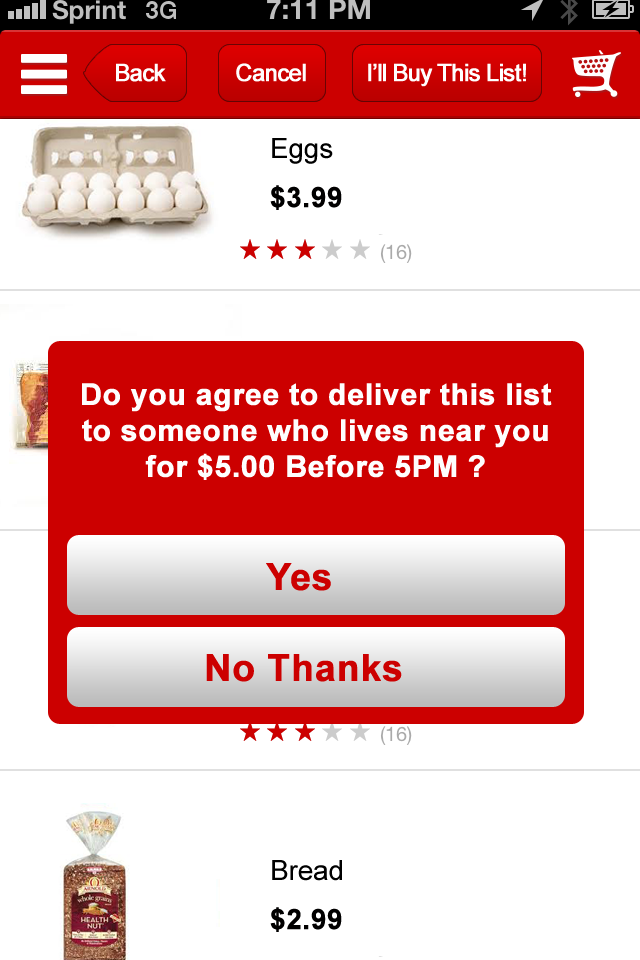
<style>
.page{position:relative;width:640px;height:960px;background:#ffffff}
.page>*{position:absolute;margin:0}
.t1{font:24px "ArialMT";letter-spacing:-0.055em;color:#fffefe;font-weight:bold}
.t2{font:27.7px "ArialMT";color:#000000}
.t3{font:25.7px "Arial-BoldMT";color:#cc0000}
.t4{font:27.7px "Arial-BoldMT";color:#010000;font-weight:bold}
.t5{font:30px "Arial-BoldMT";color:#fefefe;font-weight:bold}
.t6{font:37.3px "Arial-BoldMT";color:#cc0000;font-weight:bold}
</style>
<div class="page">
<p class="t1" style="left:116px;top:63px;width:50px;height:19px">Back</p>
<p class="t1" style="left:236px;top:63px;width:70px;height:19px">Cancel</p>
<p class="t1" style="left:368px;top:63px;width:158px;height:24px">I’ll Buy This List!</p>
<p class="t2" style="left:272px;top:138px;width:61px;height:26px"><span class="t3"><br><br></span>Eggs</p>
<p class="t4" style="left:270px;top:185px;width:72px;height:25px">$3.99</p>
<p class="t5" style="left:82px;top:383px;width:470px;height:97px;text-align:center">Do you agree to deliver this list to someone who lives near you for $5.00 Before 5PM ?</p>
<p class="t6" style="left:266px;top:563px;width:65px;height:28px">Yes</p>
<p class="t6" style="left:206px;top:654px;width:196px;height:28px">No Thanks</p>
<p class="t2" style="left:272px;top:860px;width:70px;height:21px"><span class="t3"><br><br></span>Bread</p>
<p class="t4" style="left:270px;top:907px;width:72px;height:25px">$2.99</p>
</div>
